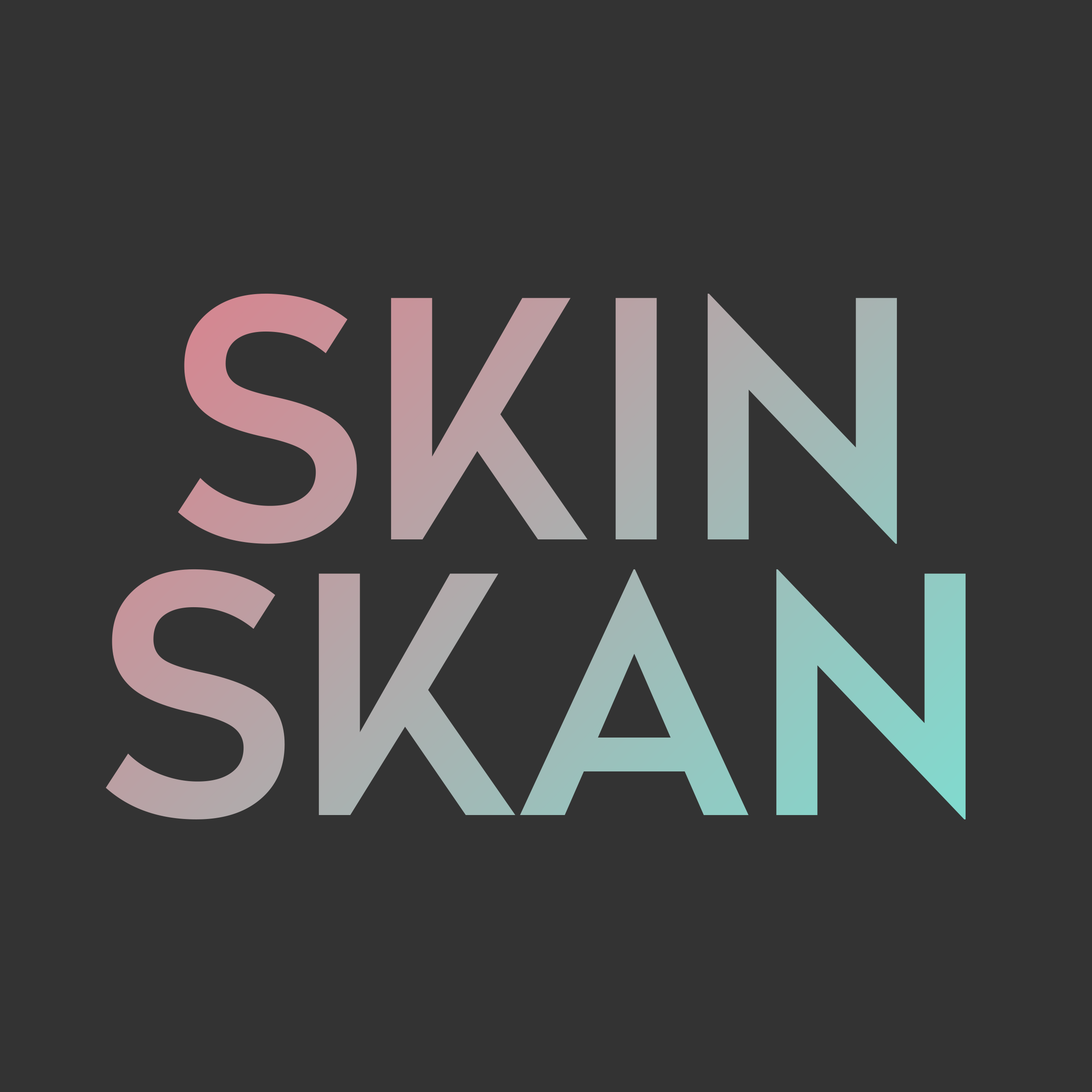
<style>
.page{position:relative;width:1092px;height:1092px;background:#333333}
.page>*{position:absolute;margin:0}
.t1{font:328.4px "Glass";color:#b8a3a5}
.t2{font:328.4px "Glass"}
</style>
<div class="page">
<p class="t1" style="left:178px;top:293px;width:719px;height:251px">SKIN</p>
<p class="t2" style="left:106px;top:569px;width:860px;height:250px">SKAN</p>
</div>
